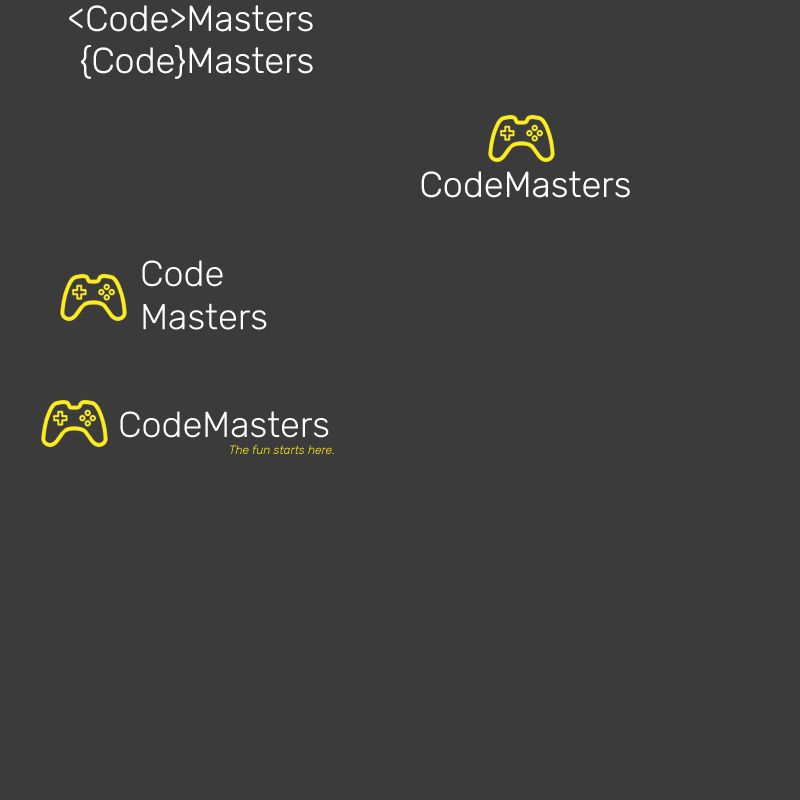
<style>
.page{position:relative;width:800px;height:800px;background:#3c3b3b}
.page>*{position:absolute;margin:0}
.t1{font:36px "Rubik-Light";color:#ffffff}
</style>
<div class="page">
<p class="t1" style="left:69px;top:5px;width:244px;height:27px">&lt;Code&gt;Masters</p>
<p class="t1" style="left:81px;top:45px;width:232px;height:34px">{Code}Masters</p>
<p class="t1" style="left:421px;top:171px;width:209px;height:27px">CodeMasters</p>
</div>
